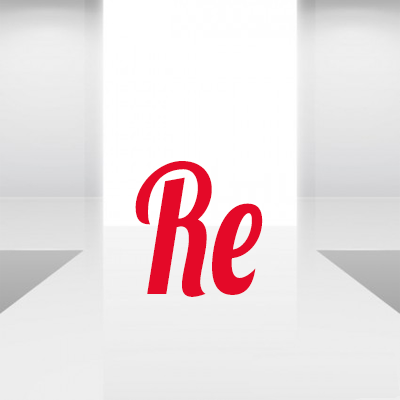
<style>
.page{position:relative;width:400px;height:400px}
.page>*{position:absolute;margin:0}
.t1{font:176.9px "Lobster1.4";color:#e40928;scale:0.74 1}
</style>
<div class="page">
<p class="t1" style="left:135px;top:161px;width:128px;height:136px">Re</p>
</div>
